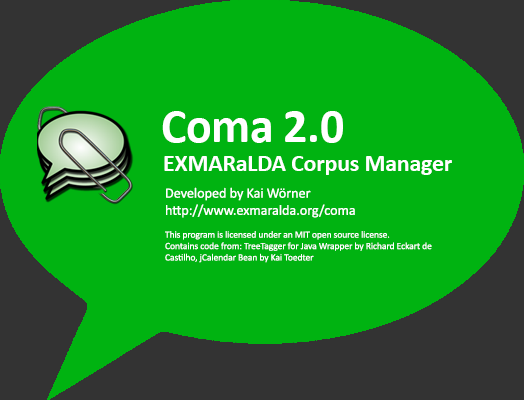
<style>
.page{position:relative;width:524px;height:400px;background:#00b311}
.page>*{position:absolute;margin:0}
.t1{font:47.6px "Calibri-Bold";letter-spacing:-0.005em;color:#ffffff}
.t2{font:23.8px "Calibri-Bold";letter-spacing:-0.005em;color:#ffffff}
.t3{font:9.5px "Calibri";letter-spacing:-0.005em;color:#ffffff}
.t4{font:14.3px "Calibri";letter-spacing:-0.005em;color:#ffffff}
</style>
<div class="page">
<p class="t1" style="left:162px;top:111px;width:181px;height:32px">Coma 2.0</p>
<p class="t2" style="left:164px;top:156px;width:288px;height:19px">EXMARaLDA Corpus Manager</p>
<p class="t3" style="left:165px;top:187px;width:267px;height:76px"><span class="t4">Developed by Kai Wörner<br>http://www.exmaralda.org/coma<br></span><br>This program is licensed under an MIT open source license. <br>Contains code from: TreeTagger for Java Wrapper by Richard Eckart de Castilho, jCalendar Bean by Kai Toedter</p>
</div>
